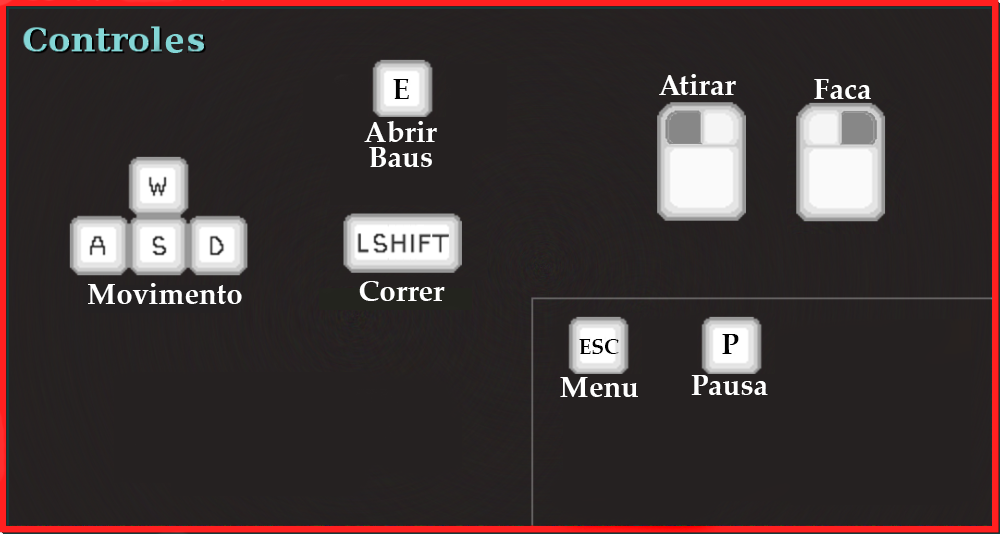
<style>
.page{position:relative;width:1000px;height:534px;background:#252121}
.page>*{position:absolute;margin:0}
.t1{font:41.5px "PalatinoLinotype-Bold";color:#83d5d5}
.t2{font:29.2px "PalatinoLinotype-Bold";color:#ffffff}
.t3{font:29.2px "PalatinoLinotype-Bold";color:#010101}
.t4{font:20.8px "PalatinoLinotype-Bold";color:#010101}
</style>
<div class="page">
<p class="t1" style="left:165px;top:34px;width:18px;height:19px">e</p>
<p class="t2" style="left:659px;top:74px;width:77px;height:21px">Atirar</p>
<p class="t3" style="left:393px;top:79px;width:16px;height:20px">E</p>
<p class="t2" style="left:814px;top:79px;width:57px;height:20px">Faca</p>
<p class="t2" style="left:364px;top:121px;width:73px;height:46px">Abrir Baus</p>
<p class="t2" style="left:359px;top:281px;width:86px;height:20px">Correr</p>
<p class="t2" style="left:88px;top:283px;width:154px;height:21px">Movimento</p>
<p class="t4" style="left:579px;top:339px;width:40px;height:15px">ESC</p>
<p class="t3" style="left:722px;top:334px;width:17px;height:20px">P</p>
<p class="t2" style="left:560px;top:377px;width:78px;height:20px">Menu</p>
<p class="t2" style="left:691px;top:375px;width:77px;height:20px">Pausa</p>
</div>
